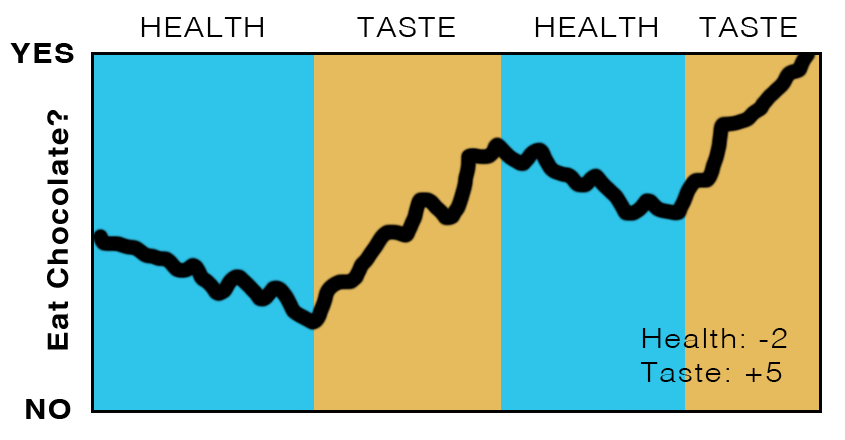
<style>
.page{position:relative;width:845px;height:440px;background:#2fc4e9}
.page>*{position:absolute;margin:0}
.t1{font:28px "Helvetica-Light";letter-spacing:0.05em;color:#000000;scale:1.1 1}
.t2{font:28px "Helvetica-Bold";letter-spacing:0.05em;color:#000000;scale:1.1 1}
</style>
<div class="page">
<p class="t1" style="left:141px;top:17px;width:122px;height:20px">HEALTH</p>
<p class="t1" style="left:357px;top:17px;width:98px;height:20px">TASTE</p>
<p class="t1" style="left:535px;top:17px;width:122px;height:20px">HEALTH</p>
<p class="t1" style="left:699px;top:17px;width:98px;height:20px">TASTE</p>
<p class="t2" style="left:10px;top:43px;width:64px;height:20px">YES</p>
<p class="t2" style="left:47px;top:110px;width:22px;height:240px;rotate:-90deg">Eat Chocolate?</p>
<p class="t1" style="left:640px;top:328px;width:147px;height:54px">Health: -2<br>Taste: +5</p>
<p class="t2" style="left:26px;top:399px;width:45px;height:20px">NO</p>
</div>
